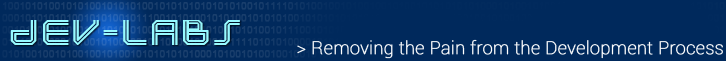
<style>
.page{position:relative;width:726px;height:61px;background:#00295c}
.page>*{position:absolute;margin:0}
.t1{font:18px "Roboto-Thin";color:#ffffff;font-weight:bold}
</style>
<div class="page">
<p class="t1" style="left:297px;top:39px;width:426px;height:20px">&gt; Removing the Pain from the Development Process</p>
</div>
